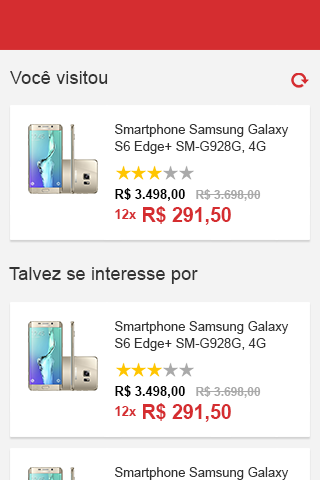
<style>
.page{position:relative;width:320px;height:480px;background:#ffffff}
.page>*{position:absolute;margin:0}
.t1{font:18.4px "ArialMT";color:#333333}
.t2{font:13px/16.8px "ArialMT";color:#333333}
.t3{font:13px "Arial-BoldMT";color:#000000}
.t4{font:11.9px "Arial-BoldMT";color:#adadad}
.t5{font:19.5px "Arial-BoldMT";color:#d52d30}
</style>
<div class="page">
<p class="t1" style="left:10px;top:71px;width:98px;height:13px">Você visitou</p>
<p class="t2" style="left:115px;top:124px;width:174px;height:30px">Smartphone Samsung Galaxy S6 Edge+ SM-G928G, 4G</p>
<p class="t3" style="left:115px;top:188px;width:70px;height:13px">R$ 3.498,00</p>
<p class="t4" style="left:196px;top:189px;width:65px;height:12px">R$ 3.698,00</p>
<p class="t5" style="left:143px;top:206px;width:88px;height:19px">R$ 291,50</p>
<p class="t1" style="left:9px;top:267px;width:189px;height:17px">Talvez se interesse por</p>
<p class="t2" style="left:115px;top:321px;width:174px;height:30px">Smartphone Samsung Galaxy S6 Edge+ SM-G928G, 4G</p>
<p class="t3" style="left:115px;top:385px;width:70px;height:13px">R$ 3.498,00</p>
<p class="t4" style="left:196px;top:386px;width:65px;height:12px">R$ 3.698,00</p>
<p class="t5" style="left:143px;top:403px;width:88px;height:19px">R$ 291,50</p>
</div>
